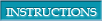
<style>
.page{position:relative;width:102px;height:21px;background:#0795af}
.page>*{position:absolute;margin:0}
.t1{font:12px "BookAntiqua";color:#ffffff}
</style>
<div class="page">
<p class="t1" style="left:6px;top:8px;width:91px;height:8px">INSTRUCTIONS</p>
</div>
